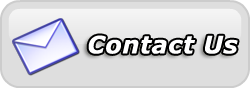
<style>
.page{position:relative;width:250px;height:88px;background:#dedede}
.page>*{position:absolute;margin:0}
.t1{font:24px "Verdana-BoldItalic";letter-spacing:0.025em;color:#ffffff}
</style>
<div class="page">
<p class="t1" style="left:88px;top:35px;width:150px;height:19px">Contact Us</p>
</div>
